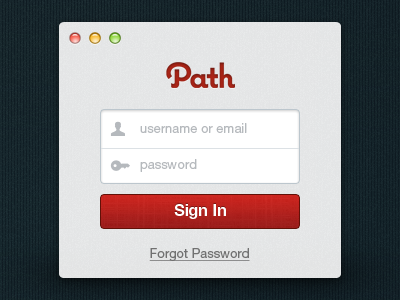
<style>
.page{position:relative;width:400px;height:300px}
.page>*{position:absolute;margin:0}
.t1{font:13px/36px "HelveticaNeueLTPro-Roman";color:#a3a7ac}
.t2{font:16px "HelveticaNeueLTPro-Bd";color:#ffffff}
.t3{font:13px "HelveticaNeueLTPro-Roman";color:#717171;text-decoration:underline}
</style>
<div class="page">
<p class="t1" style="left:140px;top:123px;width:107px;height:49px;opacity:0.8">username or email<br>password</p>
<p class="t2" style="left:174px;top:204px;width:52px;height:15px">Sign In</p>
<p class="t3" style="left:149px;top:248px;width:101px;height:13px">Forgot Password</p>
</div>
